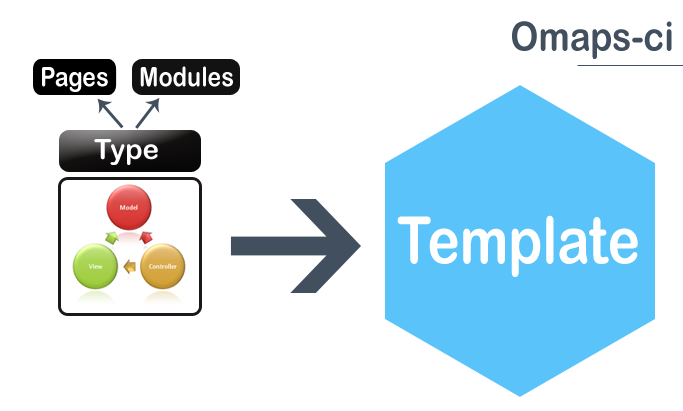
<style>
.page{position:relative;width:683px;height:411px;background:#ffffff}
.page>*{position:absolute;margin:0}
.t1{font:40.4px "ArialRoundedMTBold";color:#424f5e;scale:0.88 1}
.t2{font:27.1px "ArialRoundedMTBold";color:#ffffff;scale:0.86 1}
.t3{font:27.1px "ArialRoundedMTBold";color:#fefefe;scale:0.86 1}
.t4{font:27.9px "ArialRoundedMTBold";color:#ffffff}
.t5{font:65.2px "ArialRoundedMTBold";color:#ffffff;scale:0.84 1}
</style>
<div class="page">
<p class="t1" style="left:512px;top:21px;width:160px;height:38px">Omaps-ci</p>
<p class="t2" style="left:42px;top:67px;width:66px;height:25px">Pages</p>
<p class="t3" style="left:140px;top:66px;width:93px;height:21px">Modules</p>
<p class="t4" style="left:94px;top:139px;width:64px;height:26px">Type</p>
<p class="t5" style="left:397px;top:215px;width:241px;height:62px">Template</p>
</div>
